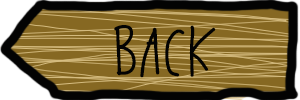
<style>
.page{position:relative;width:300px;height:100px;background:#866822}
.page>*{position:absolute;margin:0}
.t1{font:72px "BlackTinBox";color:#030303}
</style>
<div class="page">
<p class="t1" style="left:114px;top:25px;width:102px;height:53px">Back</p>
</div>
